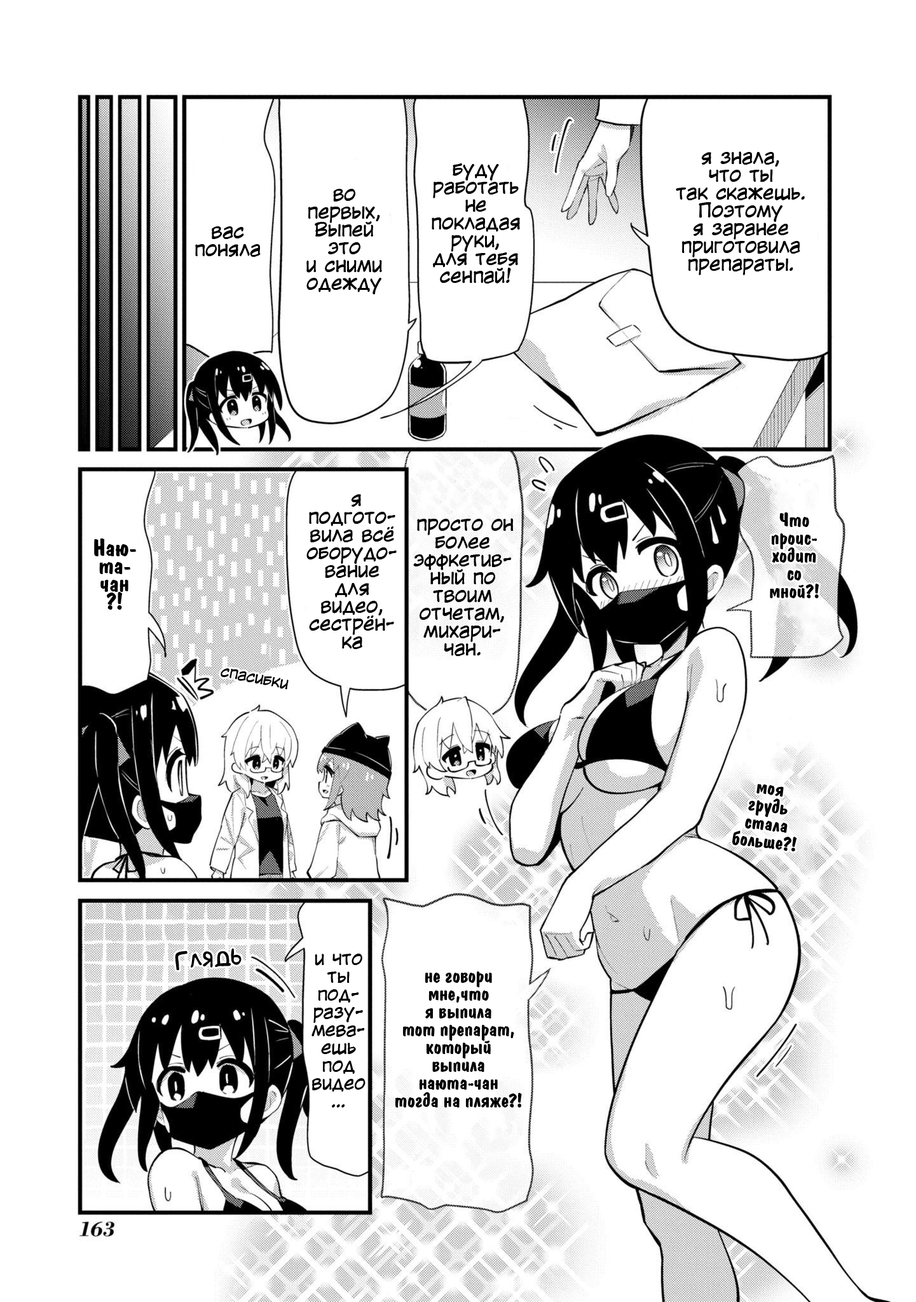
<style>
.page{position:relative;width:916px;height:1302px;background:#ffffff}
.page>*{position:absolute;margin:0}
.t1{font:19.1px/17.8px "KuraiVoice2";color:#000000}
.t2{font:19.1px/17.8px "ADomInoBold";color:#000000}
.t3{font:22.9px/17.8px "ADomInoBold";color:#000000}
.t4{font:15.3px "KuraiVoice2";color:#000000}
.t5{font:22.9px "AkbarPlain";color:#000000}
.t6{font:17.8px/17.8px "KuraiVoice2";color:#000000}
</style>
<div class="page">
<p class="t1" style="left:676px;top:151px;width:129px;height:124px;text-align:center">я знала,<br>что ты<br>так скажешь.<br>Поэтому<br>я заранее<br>приготовила<br>препараты.</p>
<p class="t1" style="left:432px;top:163px;width:88px;height:121px;text-align:center">буду<br>работать<br>не<br>покладая<br>руки,<br>для тебя<br>сенпай!</p>
<p class="t1" style="left:306px;top:189px;width:76px;height:105px;text-align:center">во<br>первых,<br>Выпей<br>это<br>и сними<br>одежду</p>
<p class="t1" style="left:195px;top:226px;width:66px;height:31px;text-align:center">вас<br>поняла</p>
<p class="t1" style="left:306px;top:494px;width:91px;height:155px;text-align:center">я подгото-<br>вила всё оборудо-вание для видео, сестрён-ка</p>
<p class="t1" style="left:413px;top:518px;width:101px;height:138px;text-align:center"><span class="t2"> </span>просто он более<br>эффкетив-ный по твоим отчетам, михари-<br>чан.</p>
<p class="t2" style="left:770px;top:512px;width:49px;height:86px;text-align:center">Что<br>проис-<br>ходит<br>со<br>мной?!</p>
<p class="t3" style="left:94px;top:538px;width:42px;height:72px;text-align:center">Наю-<br>та-<br>чан<br>?!</p>
<p class="t4" style="left:221px;top:668px;width:68px;height:22px;rotate:11deg">спасибки</p>
<p class="t2" style="left:732px;top:784px;width:65px;height:68px;text-align:center;rotate:6deg">моя<br>грудь<br>стала<br>больше?!</p>
<p class="t5" style="left:175px;top:948px;width:67px;height:22px;rotate:-4deg">Глядь</p>
<p class="t6" style="left:311px;top:953px;width:55px;height:154px;text-align:center">и что<br>ты<br>под-<br>разу-<br>мева-<br>ешь<br>под<br>видео<br>…</p>
<p class="t2" style="left:395px;top:971px;width:127px;height:136px;text-align:center">не говори<br>мне,что<br>я выпила<br>тот препарат, который                                          выпила<br>наюта-чан<br>тогда на пляже?!</p>
</div>
